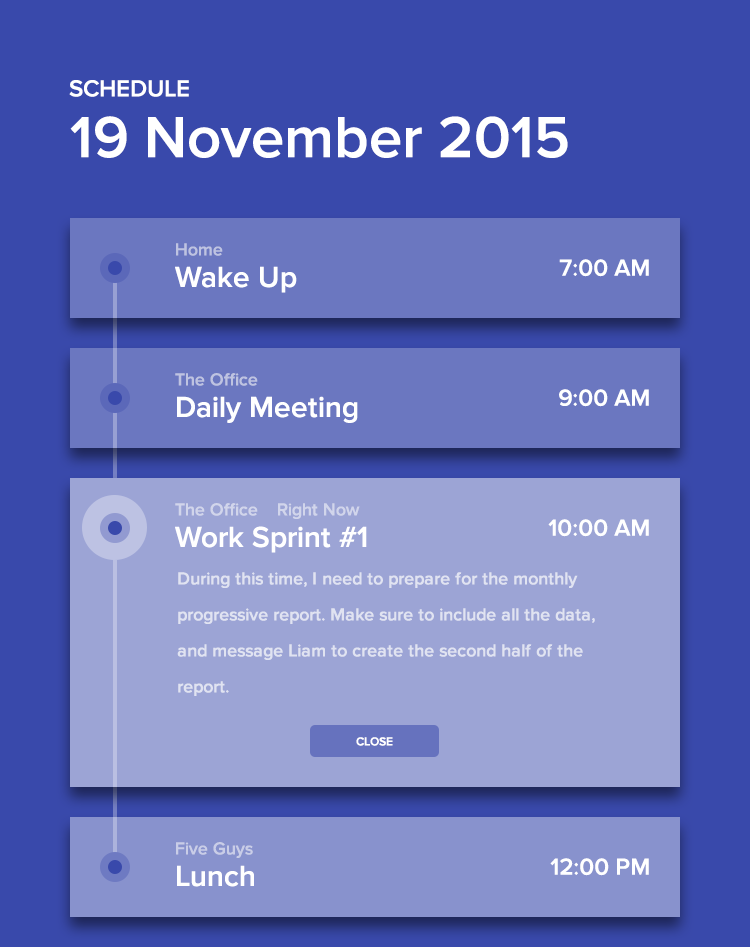
<style>
.page{position:relative;width:750px;height:947px;background:#3949ab}
.page>*{position:absolute;margin:0}
.t1{font:24px "ProximaNova-Semibold";color:#ffffff}
.t2{font:60px "ProximaNova-Semibold";color:#ffffff}
.t3{font:18px "ProximaNova-Semibold";color:#bec3e1}
.t4{font:30px "ProximaNova-Semibold";color:#ffffff}
.t5{font:18px "ProximaNova-Semibold";color:#d1d5eb}
.t6{font:18px/36px "ProximaNova-Semibold";color:#e0e3f1}
.t7{font:12px "ProximaNova-Semibold";color:#ffffff}
.t8{font:18px "ProximaNova-Semibold";color:#c9cde7}
</style>
<div class="page">
<p class="t1" style="left:69px;top:80px;width:120px;height:17px">SCHEDULE</p>
<p class="t2" style="left:70px;top:116px;width:498px;height:42px">19 November 2015</p>
<p class="t3" style="left:176px;top:243px;width:47px;height:13px">Home</p>
<p class="t4" style="left:175px;top:266px;width:122px;height:27px">Wake Up</p>
<p class="t1" style="left:559px;top:259px;width:90px;height:18px">7:00 AM</p>
<p class="t3" style="left:175px;top:373px;width:83px;height:13px">The Office</p>
<p class="t1" style="left:559px;top:389px;width:90px;height:18px">9:00 AM</p>
<p class="t4" style="left:177px;top:396px;width:181px;height:27px">Daily Meeting</p>
<p class="t5" style="left:175px;top:503px;width:83px;height:13px">The Office</p>
<p class="t5" style="left:278px;top:503px;width:82px;height:16px">Right Now</p>
<p class="t1" style="left:548px;top:519px;width:101px;height:18px">10:00 AM</p>
<p class="t4" style="left:175px;top:526px;width:192px;height:27px">Work Sprint #1</p>
<p class="t6" style="left:177px;top:572px;width:418px;height:124px">During this time, I need to prepare for the monthly<br>progressive report. Make sure to include all the data,<br>and message Liam to create the second half of the<br>report.</p>
<p class="t7" style="left:356px;top:737px;width:37px;height:9px">CLOSE</p>
<p class="t8" style="left:176px;top:842px;width:77px;height:16px">Five Guys</p>
<p class="t4" style="left:177px;top:865px;width:77px;height:22px">Lunch</p>
<p class="t1" style="left:550px;top:858px;width:99px;height:18px">12:00 PM</p>
</div>
